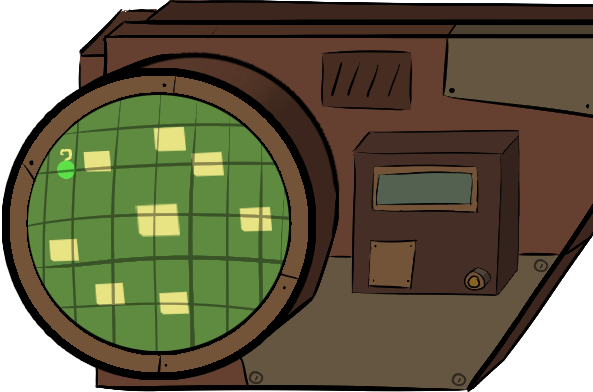
<style>
.page{position:relative;width:593px;height:392px}
.page>*{position:absolute;margin:0}
.t1{font:28.7px "IndustrialPoison";color:#ece97e}
</style>
<div class="page">
<p class="t1" style="left:60px;top:149px;width:12px;height:20px">?</p>
</div>
